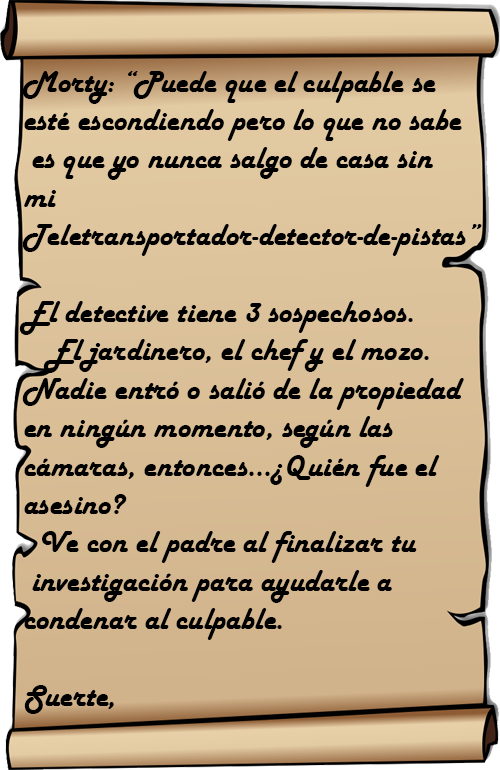
<style>
.page{position:relative;width:500px;height:770px}
.page>*{position:absolute;margin:0}
.t1{font:32px "HarlowSolid";color:#000000}
</style>
<div class="page">
<p class="t1" style="left:19px;top:71px;width:463px;height:643px">Morty: “Puede que el culpable se <br>esté escondiendo pero lo que no sabe<br> es que yo nunca salgo de casa sin <br>mi <br>Teletransportador-detector-de-pistas”<br>   <br>El detective tiene 3 sospechosos. <br>   El jardinero, el chef y el mozo. <br>Nadie entró o salió de la propiedad <br>en ningún momento, según las <br>cámaras, entonces…¿Quién fue el <br>asesino?<br>  Ve con el padre al finalizar tu<br> investigación para ayudarle a <br>condenar al culpable.<br><br>Suerte,</p>
</div>
